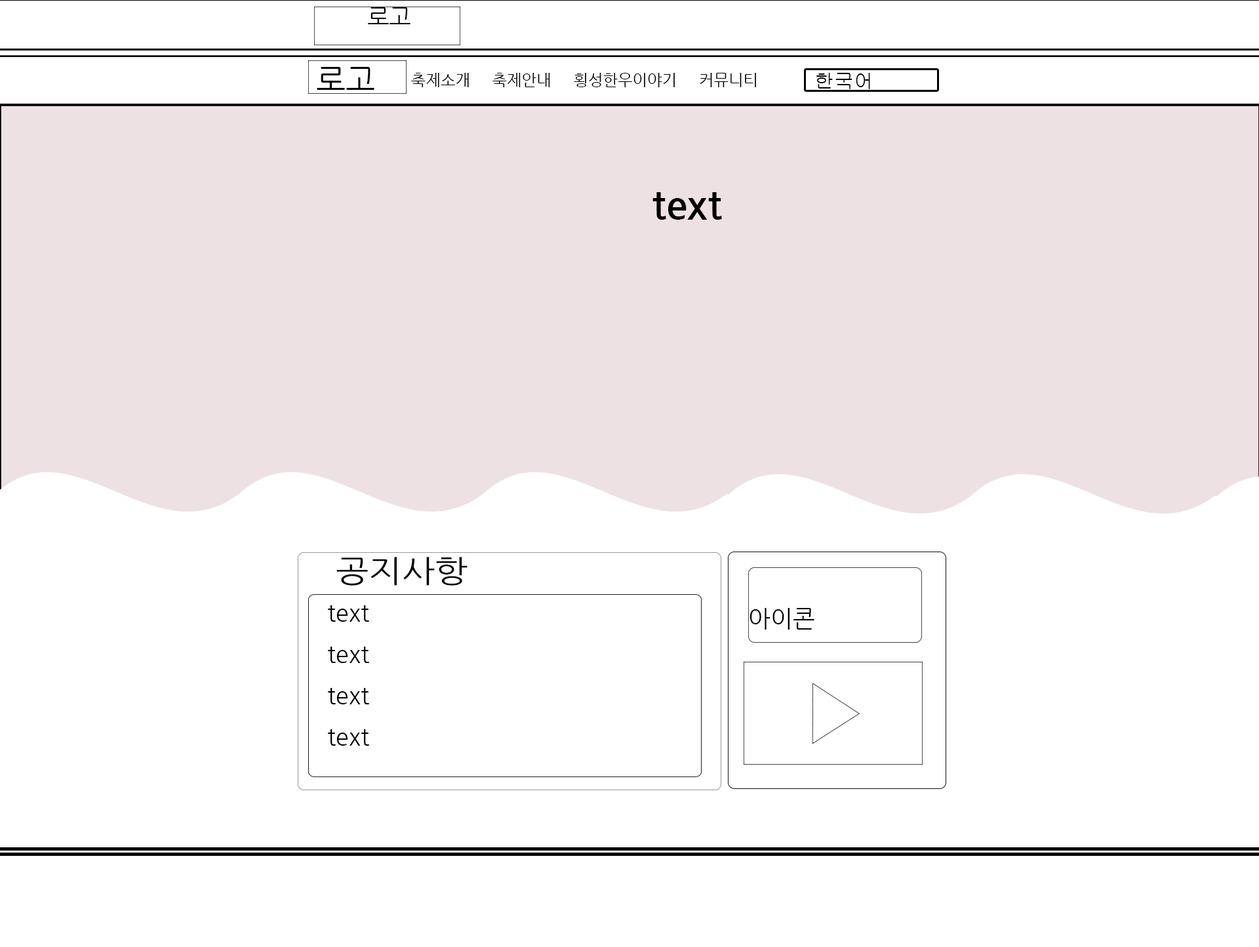
<style>
.page{position:relative;width:1259px;height:947px;background:#ffffff}
.page>*{position:absolute;margin:0}
.t1{font:23.6px "NanumGothic";color:#000000}
.t2{font:31.5px "NanumGothic";color:#000000}
.t3{font:15.7px "NanumGothic";color:#000000}
.t4{font:19.7px "Gulim";color:#000000}
.t5{font:39.3px "NanumGothicBold";color:#000000}
.t6{font:30.9px "NanumGothic";color:#000000;scale:1.14 1}
</style>
<div class="page">
<p class="t1" style="left:368px;top:7px;width:43px;height:17px">로고</p>
<p class="t2" style="left:317px;top:67px;width:57px;height:23px">로고</p>
<p class="t3" style="left:411px;top:73px;width:345px;height:14px">축제소개     축제안내     횡성한우이야기     커뮤니티</p>
<p class="t4" style="left:816px;top:73px;width:54px;height:16px">한국어</p>
<p class="t5" style="left:653px;top:192px;width:69px;height:28px">text</p>
<p class="t6" style="left:336px;top:557px;width:132px;height:29px">공지사항</p>
<p class="t1" style="left:328px;top:605px;width:41px;height:141px">text <br>text<br>text<br>text</p>
<p class="t1" style="left:750px;top:608px;width:65px;height:22px">아이콘</p>
</div>
